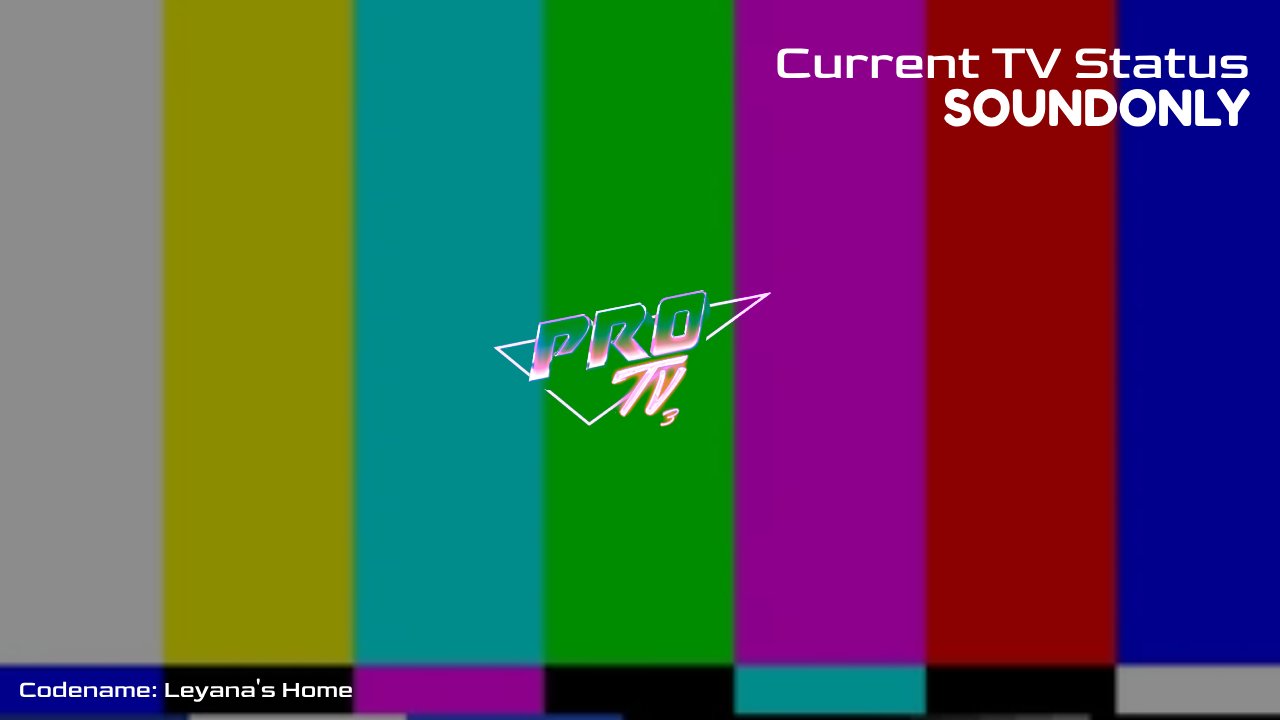
<style>
.page{position:relative;width:1280px;height:720px}
.page>*{position:absolute;margin:0}
.t1{font:50px "Goldman-Regular";color:#ffffff}
.t2{font:50px "FredokaOne-Regular";color:#ffffff}
.t3{font:24px "Goldman-Regular";color:#ffffff}
</style>
<div class="page">
<p class="t1" style="left:777px;top:48px;width:471px;height:30px">Current TV Status</p>
<p class="t2" style="left:944px;top:88px;width:306px;height:39px">SOUNDONLY</p>
<p class="t3" style="left:20px;top:678px;width:333px;height:24px">Codename: Leyana's Home</p>
</div>
